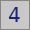
<style>
.page{position:relative;width:30px;height:30px;background:#c9c7c7}
.page>*{position:absolute;margin:0}
.t1{font:20.8px "Menlo-Regular";color:#1f2575}
</style>
<div class="page">
<p class="t1" style="left:8px;top:7px;width:12px;height:15px">4</p>
</div>
